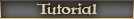
<style>
.page{position:relative;width:134px;height:19px}
.page>*{position:absolute;margin:0}
.t1{font:16.3px "Immortal";color:#e0ceab}
</style>
<div class="page">
<p class="t1" style="left:36px;top:3px;width:61px;height:12px">Tutorial</p>
</div>
